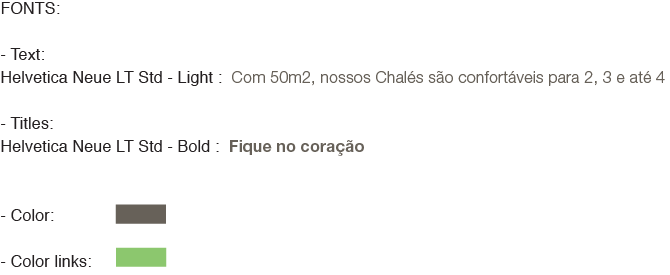
<style>
.page{position:relative;width:670px;height:275px;background:#ffffff}
.page>*{position:absolute;margin:0}
.t1{font:16px/23px "HelveticaNeueLTStd-Lt";letter-spacing:0.011em;color:#676159}
.t2{font:16px/23px "Helvetica";letter-spacing:0.011em;color:#231f20}
.t3{font:16px/23px "HelveticaNeueLTStd-Bd";letter-spacing:0.011em;color:#676159}
</style>
<div class="page">
<p class="t1" style="left:1px;top:2px;width:664px;height:265px"><span class="t2">FONTS:<br><br>- Text:<br>Helvetica Neue LT Std - Light :  </span>Com 50m2, nossos Chalés são confortáveis para 2, 3 e até 4 <br><span class="t2"><br>- Titles:<br>Helvetica Neue LT Std - Bold : </span><span class="t3"> Fique no coração<br><br><br></span><span class="t2">- Color:<br><br>- Color links:</span></p>
</div>
